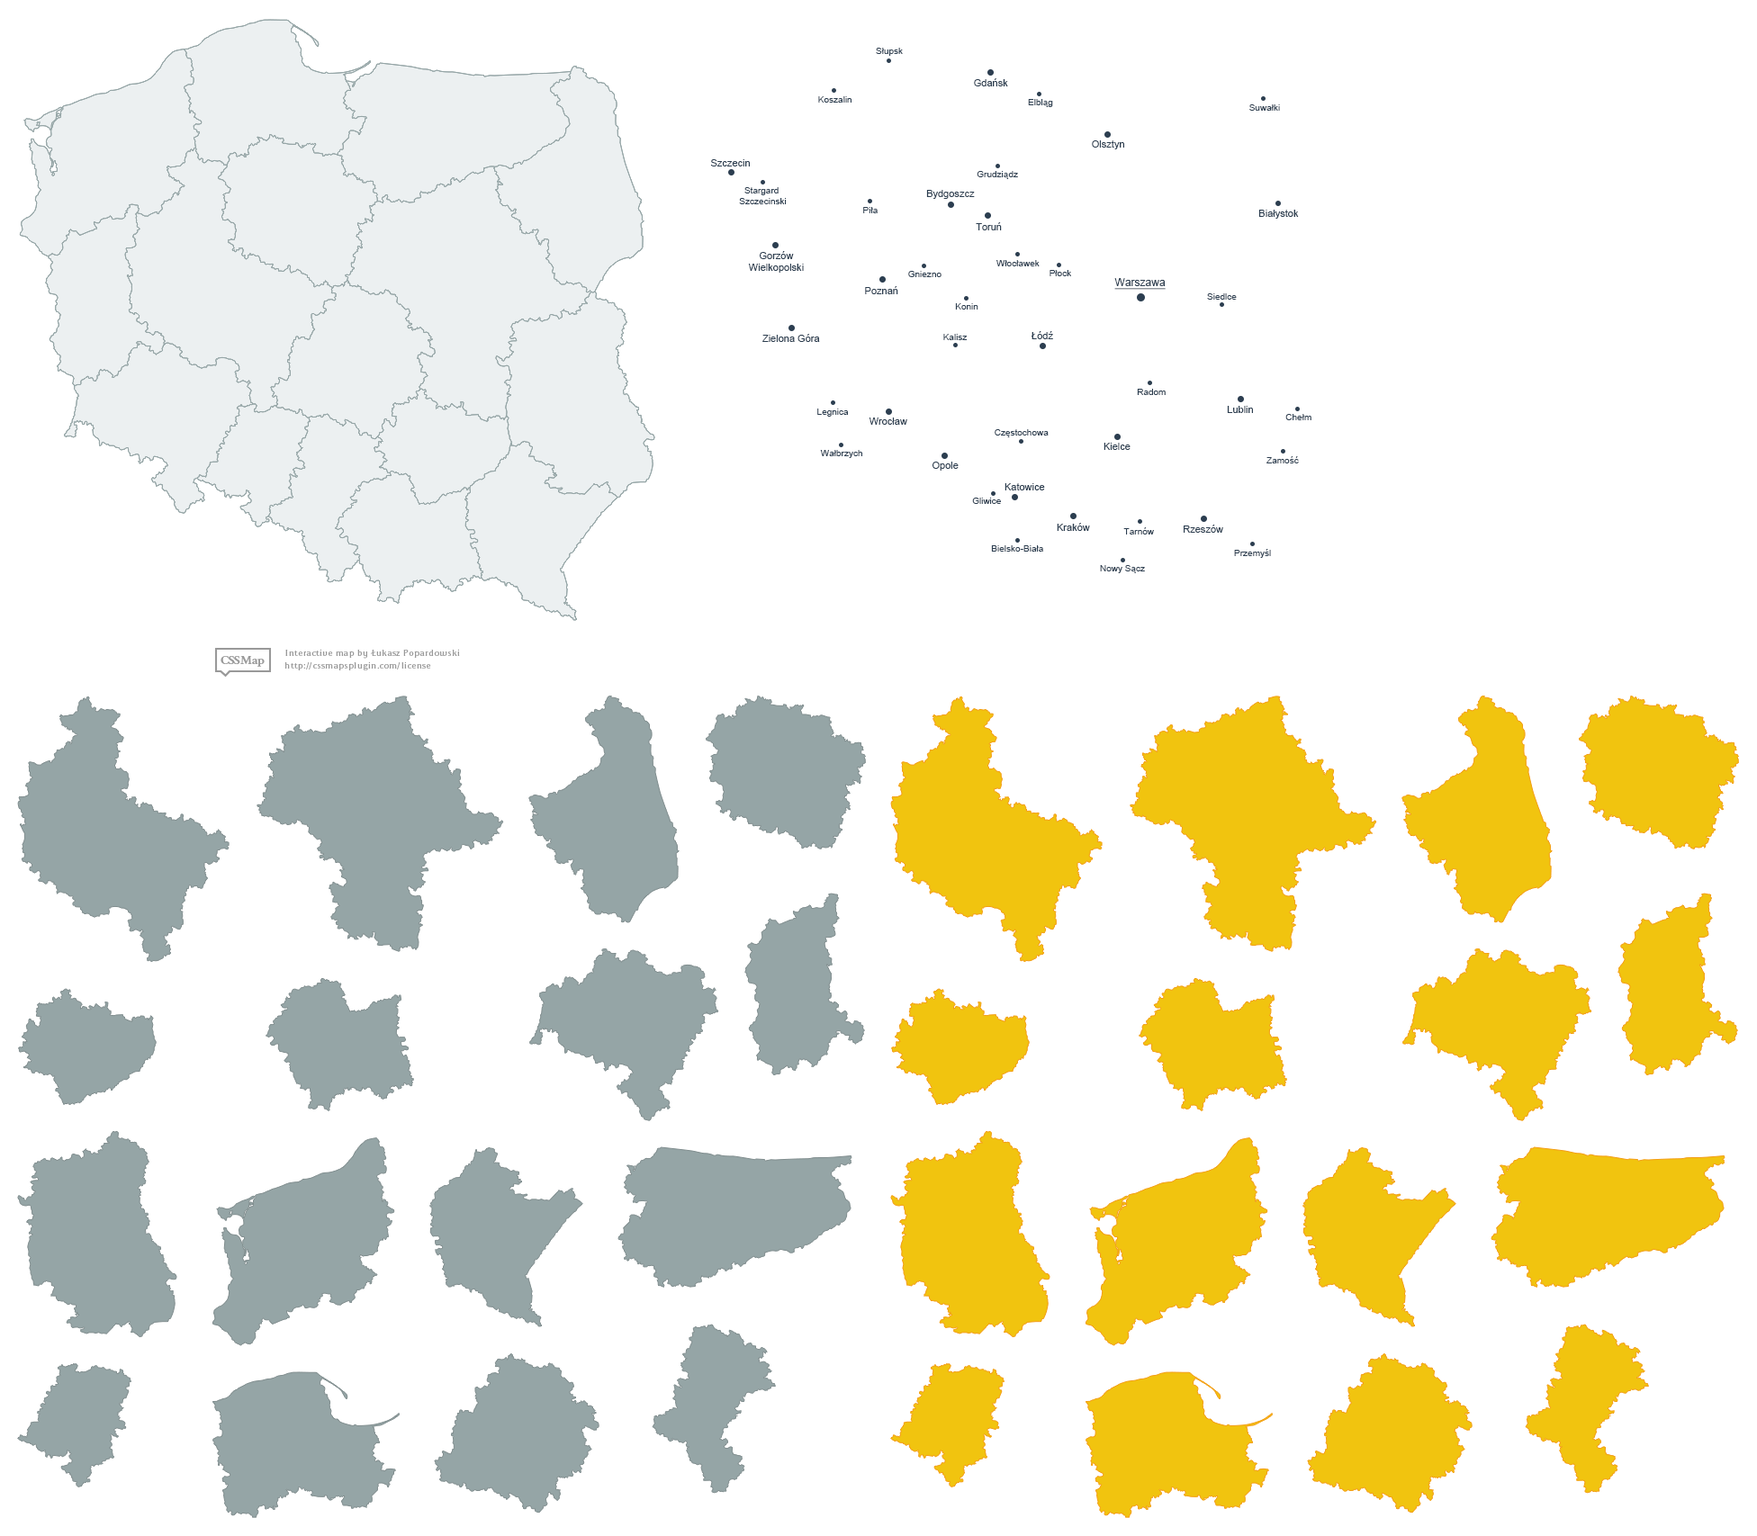
<style>
.page{position:relative;width:1757px;height:1536px;background:#ffffff}
.page>*{position:absolute;margin:0}
.t1{font:9px "ArialMT";color:#2c3e50}
.t2{font:9.9px "ArialMT";color:#2c3e50}
.t3{font:10.8px "ArialMT";color:#2c3e50;text-decoration:underline}
</style>
<div class="page">
<p class="t1" style="left:876px;top:48px;width:27px;height:8px">Słupsk</p>
<p class="t2" style="left:974px;top:78px;width:34px;height:8px">Gdańsk</p>
<p class="t1" style="left:818px;top:96px;width:33px;height:7px">Koszalin</p>
<p class="t1" style="left:1028px;top:99px;width:25px;height:8px">Elbląg</p>
<p class="t1" style="left:1249px;top:104px;width:31px;height:7px">Suwałki</p>
<p class="t2" style="left:1092px;top:140px;width:32px;height:9px">Olsztyn</p>
<p class="t2" style="left:710px;top:159px;width:40px;height:7px">Szczecin</p>
<p class="t1" style="left:976px;top:171px;width:42px;height:8px">Grudziądz</p>
<p class="t1" style="left:739px;top:187px;width:48px;height:17px;text-align:center">Stargard <br>Szczecinski</p>
<p class="t2" style="left:926px;top:190px;width:49px;height:9px">Bydgoszcz</p>
<p class="t1" style="left:863px;top:207px;width:14px;height:6px">Piła</p>
<p class="t2" style="left:1258px;top:210px;width:41px;height:9px">Białystok</p>
<p class="t2" style="left:976px;top:222px;width:26px;height:8px">Toruń</p>
<p class="t2" style="left:748px;top:251px;width:56px;height:22px;text-align:center">Gorzów<br>Wielkopolski</p>
<p class="t1" style="left:996px;top:260px;width:43px;height:6px">Włocławek</p>
<p class="t1" style="left:1049px;top:270px;width:22px;height:6px">Płock</p>
<p class="t1" style="left:908px;top:271px;width:33px;height:6px">Gniezno</p>
<p class="t3" style="left:1114px;top:278px;width:51px;height:12px">Warszawa</p>
<p class="t2" style="left:865px;top:286px;width:33px;height:8px">Poznań</p>
<p class="t1" style="left:1207px;top:293px;width:30px;height:7px">Siedlce</p>
<p class="t1" style="left:955px;top:303px;width:23px;height:7px">Konin</p>
<p class="t2" style="left:762px;top:334px;width:58px;height:8px">Zielona Góra</p>
<p class="t1" style="left:943px;top:334px;width:24px;height:6px">Kalisz</p>
<p class="t2" style="left:1030px;top:331px;width:23px;height:8px">Łódź</p>
<p class="t1" style="left:1137px;top:389px;width:28px;height:6px">Radom</p>
<p class="t1" style="left:817px;top:409px;width:32px;height:8px">Legnica</p>
<p class="t2" style="left:1227px;top:406px;width:26px;height:7px">Lublin</p>
<p class="t1" style="left:1285px;top:414px;width:26px;height:6px">Chełm</p>
<p class="t2" style="left:868px;top:418px;width:39px;height:7px">Wrocław</p>
<p class="t1" style="left:994px;top:429px;width:54px;height:8px">Częstochowa</p>
<p class="t1" style="left:820px;top:450px;width:42px;height:8px">Wałbrzych</p>
<p class="t2" style="left:1103px;top:443px;width:27px;height:7px">Kielce</p>
<p class="t2" style="left:932px;top:462px;width:26px;height:9px">Opole</p>
<p class="t1" style="left:1266px;top:456px;width:33px;height:7px">Zamość</p>
<p class="t2" style="left:1004px;top:483px;width:41px;height:7px">Katowice</p>
<p class="t1" style="left:972px;top:498px;width:29px;height:6px">Gliwice</p>
<p class="t2" style="left:1057px;top:523px;width:33px;height:8px">Kraków</p>
<p class="t1" style="left:1123px;top:527px;width:31px;height:8px">Tarnów</p>
<p class="t2" style="left:1183px;top:525px;width:40px;height:8px">Rzeszów</p>
<p class="t1" style="left:991px;top:545px;width:52px;height:7px">Bielsko-Biała</p>
<p class="t1" style="left:1234px;top:549px;width:37px;height:9px">Przemyśl</p>
<p class="t1" style="left:1100px;top:565px;width:45px;height:8px">Nowy Sącz</p>
</div>
